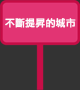
<style>
.page{position:relative;width:80px;height:90px;background:#333333}
.page>*{position:absolute;margin:0}
.t1{font:9.6px "LiGothicMed";letter-spacing:0.025em;color:#fcfcfc;font-weight:bold}
</style>
<div class="page">
<p class="t1" style="left:5px;top:18px;width:71px;height:10px">不斷提昇的城市</p>
</div>
